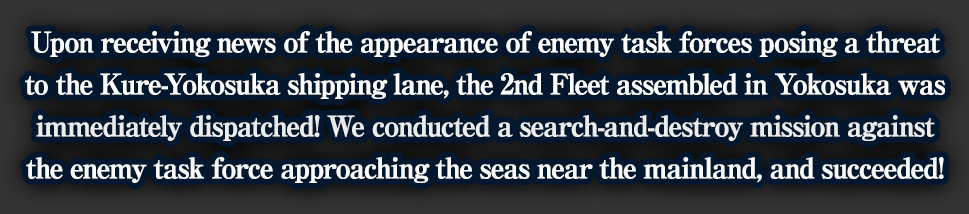
<style>
.page{position:relative;width:969px;height:214px;background:#03172f}
.page>*{position:absolute;margin:0}
.t1{font:28px/42px "RyuminPro-ExBold";letter-spacing:-0.08em;color:#ffffff;font-weight:bold}
</style>
<div class="page">
<p class="t1" style="left:25px;top:31px;width:920px;height:152px;text-align:center">Upon receiving news of the appearance of enemy task forces posing a threat<br>to the Kure-Yokosuka shipping lane, the 2nd Fleet assembled in Yokosuka was<br>immediately dispatched! We conducted a search-and-destroy mission against<br>the enemy task force approaching the seas near the mainland, and succeeded!</p>
</div>
